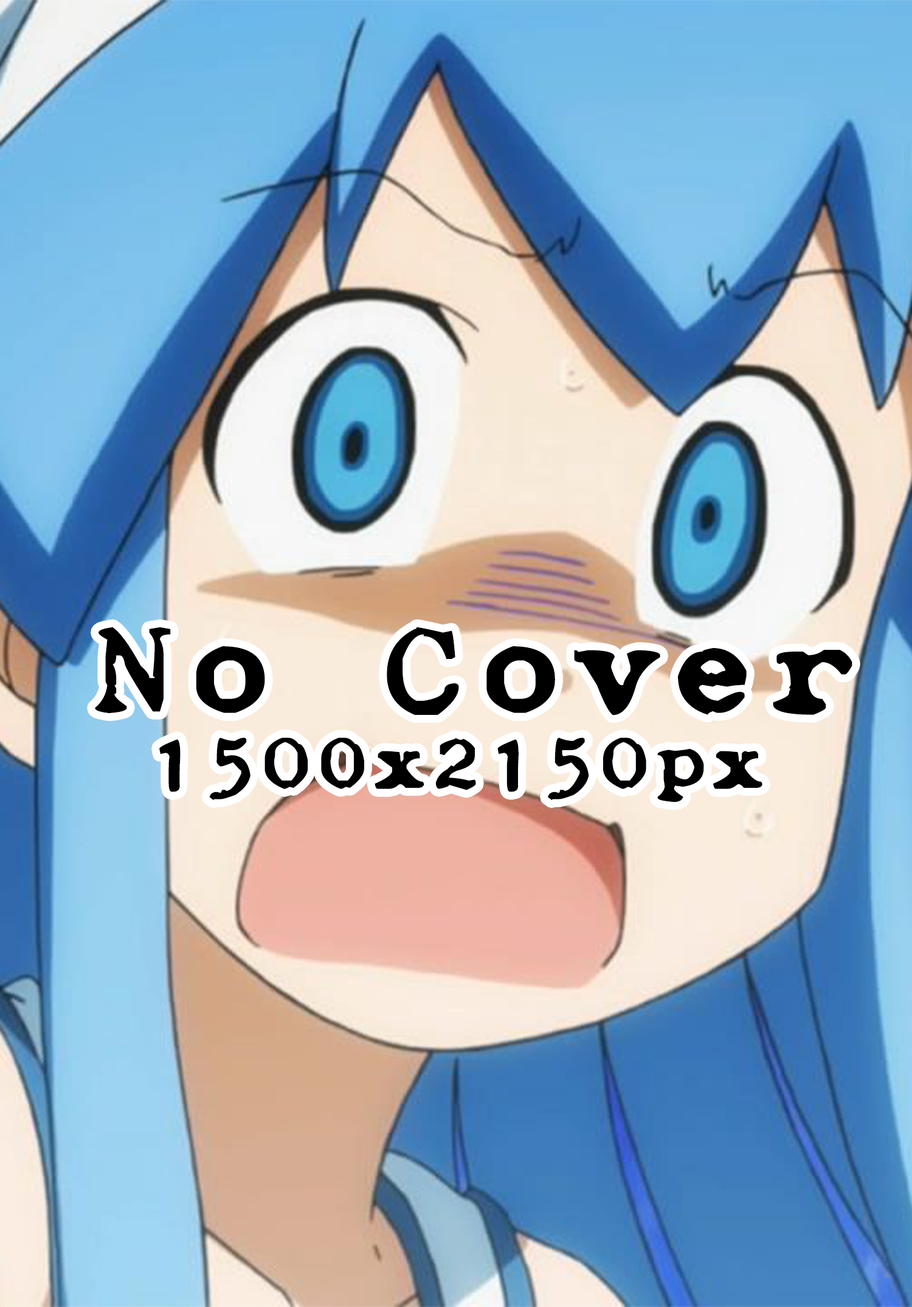
<style>
.page{position:relative;width:912px;height:1307px}
.page>*{position:absolute;margin:0}
.t1{font:165.1px "zaiAdler7Typewriter1925";color:#000000}
.t2{font:96.2px "zaiAdler7Typewriter1925";color:#000000}
</style>
<div class="page">
<p class="t1" style="left:95px;top:627px;width:758px;height:89px">No Cover</p>
<p class="t2" style="left:159px;top:738px;width:604px;height:65px">1500x2150px</p>
</div>
